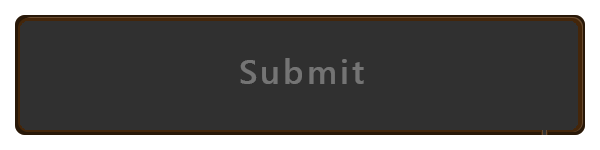
<style>
.page{position:relative;width:600px;height:150px;background:#303030}
.page>*{position:absolute;margin:0}
.t1{font:33.5px "YuGothicUI-Bold";letter-spacing:0.1em;color:#747474}
</style>
<div class="page">
<p class="t1" style="left:240px;top:58px;width:124px;height:26px">Submit</p>
</div>
